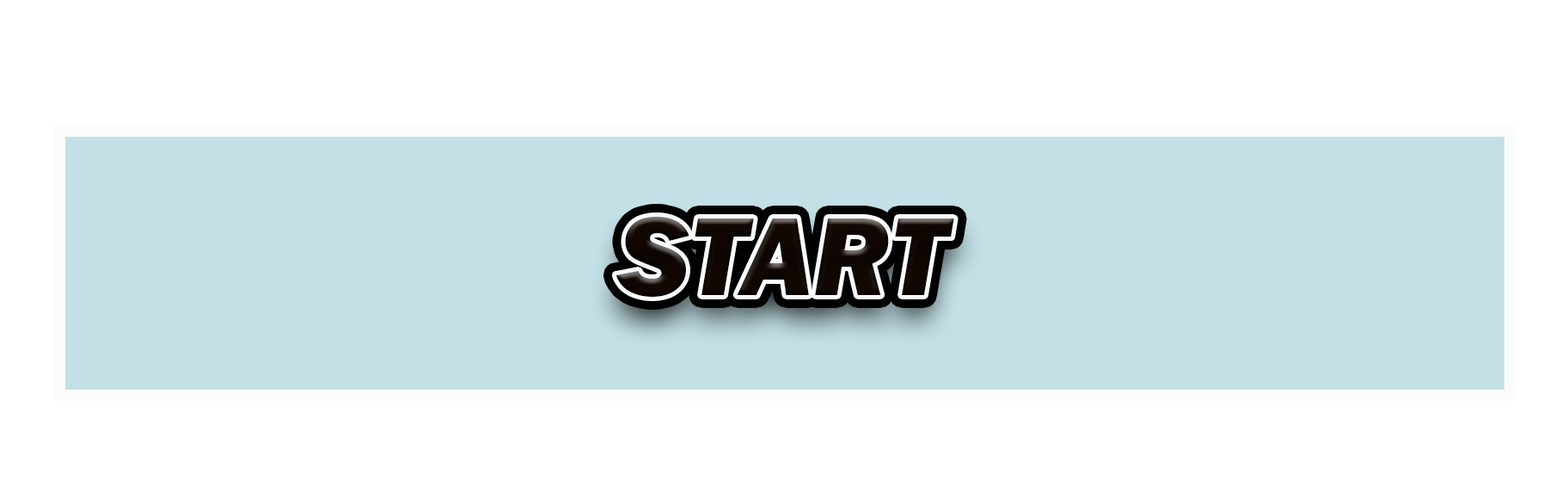
<style>
.page{position:relative;width:1568px;height:480px;background:#ffffff}
.page>*{position:absolute;margin:0}
.t1{font:115.3px "FranklinGothic-HeavyItalic";color:#180a03}
</style>
<div class="page">
<p class="t1" style="left:616px;top:217px;width:338px;height:80px">START</p>
</div>
